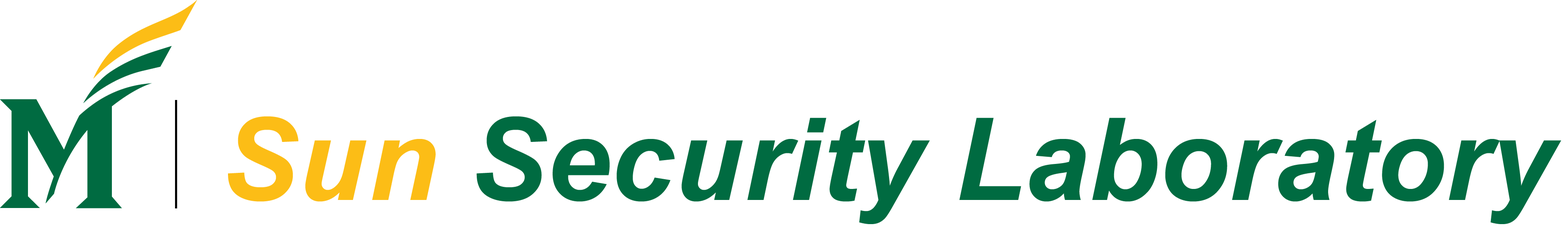
<style>
.page{position:relative;width:1568px;height:233px;background:#ffffff}
.page>*{position:absolute;margin:0}
.t1{font:114.8px "Arial-BoldItalicMT";color:#006b41}
.t2{font:114.8px "Arial-BoldItalicMT";color:#fcbd16}
</style>
<div class="page">
<p class="t1" style="left:228px;top:116px;width:1333px;height:108px"><span class="t2">Sun </span>Security Laboratory</p>
</div>
